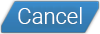
<style>
.page{position:relative;width:100px;height:34px}
.page>*{position:absolute;margin:0}
.t1{font:22px "Roboto-Light";color:#ffffff}
</style>
<div class="page">
<p class="t1" style="left:18px;top:7px;width:64px;height:17px">Cancel</p>
</div>
